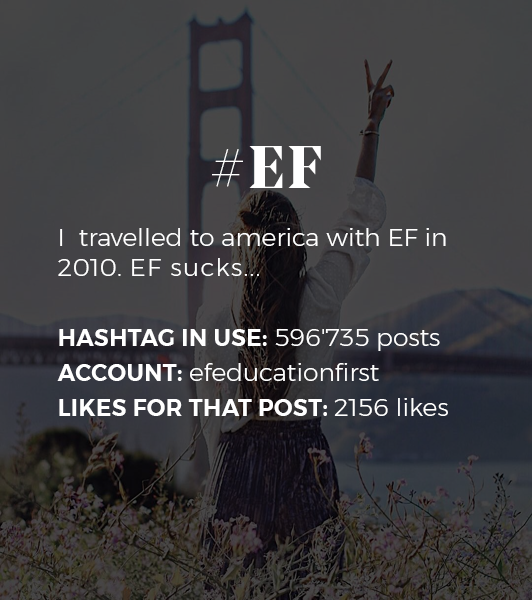
<style>
.page{position:relative;width:532px;height:600px}
.page>*{position:absolute;margin:0}
.t1{font:25px "Montserrat-Light";color:#ffffff}
.t2{font:60px "NoeDisplay-Bold";letter-spacing:0.05em;color:#ffffff;text-transform:uppercase}
.t3{font:25px "Montserrat-Light";letter-spacing:0.05em;color:#ffffff}
.t4{font:23px "Montserrat-Light";letter-spacing:0.05em;color:#ffffff}
.t5{font:23px/35px "Montserrat-SemiBold";letter-spacing:0.02em;color:#ffffff;text-transform:uppercase}
.t6{font:25px/35px "Montserrat-Light";color:#ffffff}
</style>
<div class="page">
<p class="t1" style="left:57px;top:146px;width:391px;height:270px;text-align:center"><span class="t2">#EF<br><br></span>I  travelled to america with EF in 2010.<span class="t3"> EF sucks..</span><span class="t4">.<br><br></span><span class="t5">Hashtag in use: </span><span class="t6">596'735 posts<br></span><span class="t5">ACCOUNT: </span><span class="t6">efeducationfirst<br></span><span class="t5">Likes for that post: </span><span class="t6">2156 likes</span></p>
</div>
